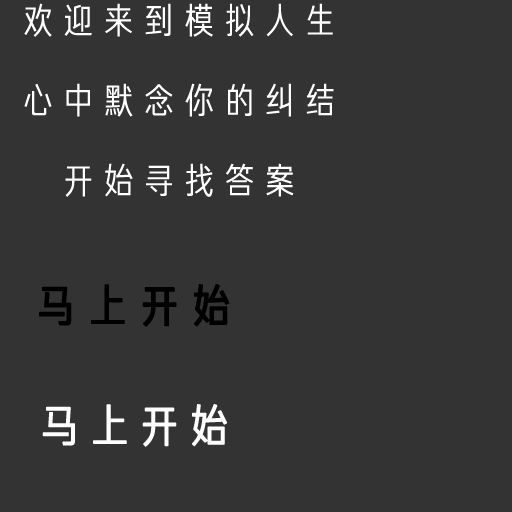
<style>
.page{position:relative;width:512px;height:512px;background:#333333}
.page>*{position:absolute;margin:0}
.t1{font:36px/80px "FZJHJW--GB1-0";letter-spacing:0.12em;color:#ffffff}
.t2{font:45.2px "FZJUNH_ZHUNJW--GB1-0";letter-spacing:0.3em;color:#000000;font-weight:bold}
.t3{font:45.2px "FZJHJW--GB1-0";letter-spacing:0.079em;color:#ffffff;font-weight:bold}
</style>
<div class="page">
<p class="t1" style="left:24px;top:3px;width:310px;height:194px;text-align:center">欢迎来到模拟人生<br>心中默念你的纠结<br>开始寻找答案</p>
<p class="t2" style="left:39px;top:284px;width:191px;height:43px">马上开始</p>
<p class="t3" style="left:42px;top:404px;width:186px;height:43px">马上开始</p>
</div>
